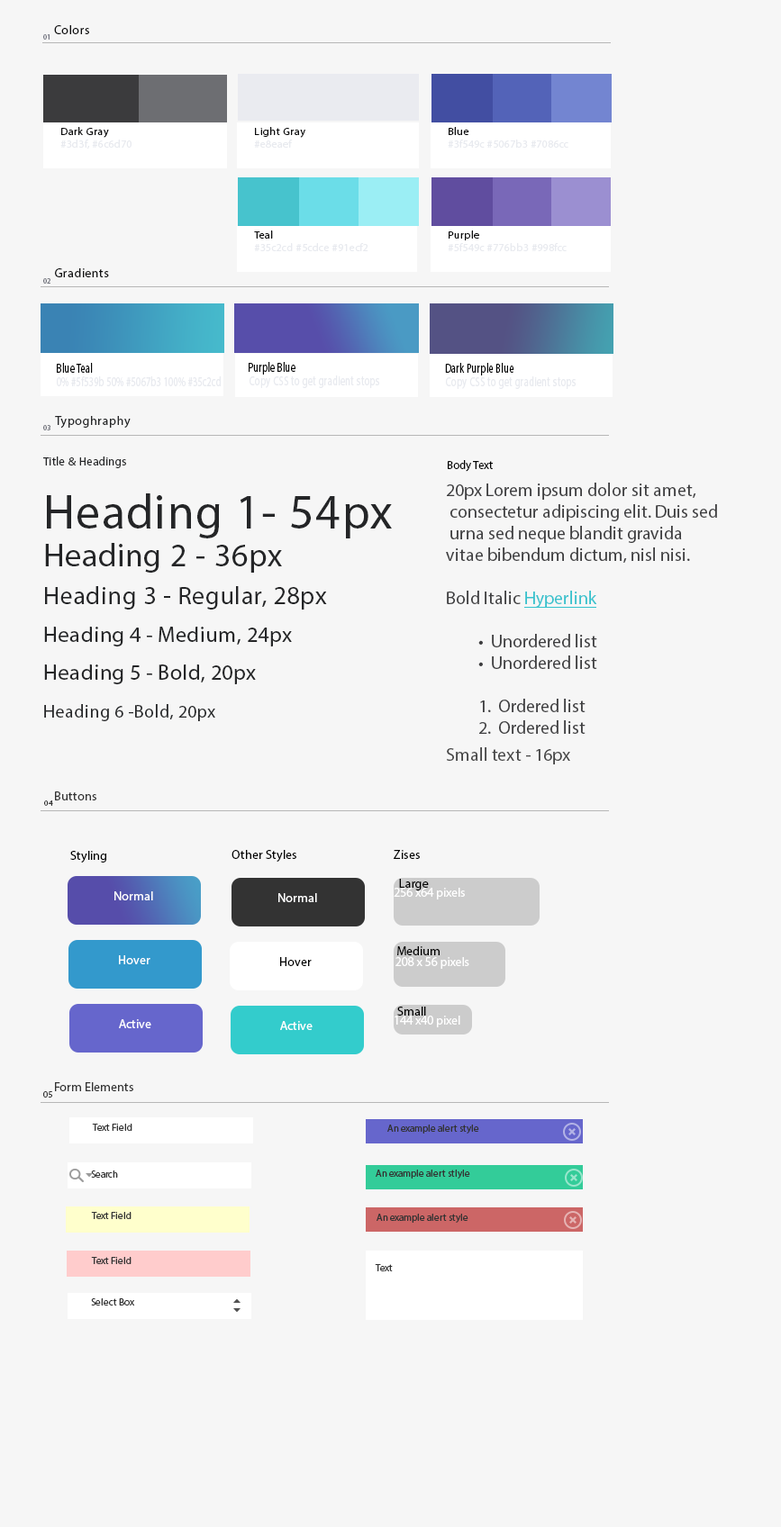
<style>
.page{position:relative;width:781px;height:1527px;background:#f6f6f6}
.page>*{position:absolute;margin:0}
.t1{font:12.6px "MyriadPro-Regular";letter-spacing:0.025em;color:#0c0c0d}
.t2{font:7.2px "MyriadPro-Regular";letter-spacing:0.025em;color:#767884}
.t3{font:10.7px/12.6px "MyriadPro-Regular";letter-spacing:0.025em;color:#e8eaef}
.t4{font:10.7px/12.6px "MyriadPro-Regular";letter-spacing:0.025em;color:#0c0c0d}
.t5{font:12.6px "MyriadPro-Regular";letter-spacing:0.025em;color:#121213}
.t6{font:7.2px "MyriadPro-Regular";letter-spacing:0.025em;color:#71737c}
.t7{font:13.4px/13.4px "MyriadPro-Regular";letter-spacing:0.025em;color:#e8eaef;scale:0.7 1}
.t8{font:13.4px/13.4px "MyriadPro-Regular";letter-spacing:0.025em;color:#060606;scale:0.7 1}
.t9{font:12.6px "MyriadPro-Regular";letter-spacing:0.025em;color:#242527}
.t10{font:21.6px/12.6px "MyriadPro-Regular";letter-spacing:0.025em;color:#242527}
.t11{font:11.7px/12.6px "MyriadPro-Regular";letter-spacing:0.025em;color:#242527}
.t12{font:48.6px/12.6px "MyriadPro-Regular";letter-spacing:0.025em;color:#242527}
.t13{font:32.4px/12.6px "MyriadPro-Regular";letter-spacing:0.025em;color:#242527}
.t14{font:25.2px/12.6px "MyriadPro-Regular";letter-spacing:0.025em;color:#242527}
.t15{font:18px/12.6px "MyriadPro-Regular";letter-spacing:0.025em;color:#242527}
.t16{font:11.7px "MyriadPro-Regular";color:#000000}
.t17{font:18px/21.6px "MyriadPro-Regular";color:#3d3d3f}
.t18{font:18px/21.6px "MyriadPro-Regular";color:#35c2cd;text-decoration:underline}
.t19{font:18px/27px "MyriadPro-Regular";color:#444444}
.t20{font:12.6px "MyriadPro-Regular";color:#333333}
.t21{font:8.1px "MyriadPro-Regular";color:#333333}
.t22{font:12.6px "MyriadPro-Regular";color:#000000}
.t23{font:12.6px "MyriadPro-Regular";color:#ffffff}
.t24{font:9px "MyriadPro-Regular";color:#333333}
.t25{font:9.9px "MyriadPro-Regular";color:#333333}
</style>
<div class="page">
<p class="t1" style="left:54px;top:25px;width:35px;height:9px">Colors</p>
<p class="t2" style="left:43px;top:34px;width:7px;height:6px">01</p>
<p class="t3" style="left:60px;top:127px;width:71px;height:22px"><span class="t4">Dark Gray<br></span>#3d3f, #6c6d70</p>
<p class="t4" style="left:254px;top:127px;width:51px;height:21px">Light Gray<br><span class="t3">#e8eaef</span></p>
<p class="t3" style="left:448px;top:127px;width:120px;height:21px"><span class="t4">Blue<br></span>#3f549c #5067b3 #7086cc</p>
<p class="t3" style="left:254px;top:231px;width:114px;height:20px"><span class="t4">Teal<br></span>#35c2cd #5cdce #91ecf2</p>
<p class="t3" style="left:448px;top:231px;width:118px;height:20px"><span class="t4">Purple<br></span>#5f549c #776bb3 #998fcc</p>
<p class="t5" style="left:55px;top:268px;width:54px;height:9px">Gradients</p>
<p class="t6" style="left:43px;top:278px;width:7px;height:6px">02</p>
<p class="t7" style="left:57px;top:363px;width:164px;height:23px;text-align:center"><span class="t8">                Blue Teal<br></span>0% #5f539b 50% #5067b3 100% #35c2cd</p>
<p class="t7" style="left:249px;top:362px;width:130px;height:26px;text-align:center"><span class="t8">                    Purple Blue<br></span>Copy CSS to get gradient stops</p>
<p class="t7" style="left:445px;top:363px;width:130px;height:26px;text-align:center"><span class="t8">                              Dark Purple Blue<br></span>Copy CSS to get gradient stops</p>
<p class="t6" style="left:43px;top:425px;width:7px;height:5px">03</p>
<p class="t9" style="left:55px;top:416px;width:76px;height:13px">Typoghraphy</p>
<p class="t10" style="left:43px;top:457px;width:349px;height:264px"><span class="t11">Title &amp; Headings<br><br><br><br><br></span><span class="t12">Heading 1- 54px<br><br><br></span><span class="t13">Heading 2 - 36px<br><br><br></span><span class="t14">Heading 3 - Regular, 28px<br><br><br></span>Heading 4 - Medium, 24px<br><br><br>Heading 5 - Bold, 20px<br><br><br><span class="t15">Heading 6 -Bold, 20px</span></p>
<p class="t16" style="left:448px;top:460px;width:45px;height:12px">Body Text</p>
<p class="t17" style="left:446px;top:483px;width:271px;height:282px">20px Lorem ipsum dolor sit amet,<br> consectetur adipiscing elit. Duis sed<br> urna sed neque blandit gravida <br>vitae bibendum dictum, nisl nisi.<br><br>Bold Italic <span class="t18">Hyperlink <br><br></span> •  Unordered list<br> •  Unordered list<br><br> 1.  Ordered list<br> 2.  Ordered list<br><span class="t19">Small text - 16px</span></p>
<p class="t20" style="left:55px;top:792px;width:41px;height:9px">Buttons</p>
<p class="t21" style="left:44px;top:801px;width:9px;height:5px">04</p>
<p class="t22" style="left:70px;top:851px;width:36px;height:12px">Styling</p>
<p class="t22" style="left:231px;top:850px;width:65px;height:12px">Other Styles</p>
<p class="t22" style="left:394px;top:850px;width:26px;height:9px">Zises</p>
<p class="t23" style="left:114px;top:892px;width:39px;height:9px">Normal</p>
<p class="t23" style="left:278px;top:893px;width:39px;height:9px">Normal</p>
<p class="t22" style="left:397px;top:946px;width:42px;height:9px">Medium</p>
<p class="t23" style="left:119px;top:955px;width:31px;height:9px">Hover</p>
<p class="t22" style="left:280px;top:957px;width:32px;height:9px">Hover</p>
<p class="t23" style="left:395px;top:957px;width:74px;height:12px">208 x 56 pixels</p>
<p class="t23" style="left:119px;top:1019px;width:32px;height:9px">Active</p>
<p class="t23" style="left:280px;top:1021px;width:32px;height:9px">Active</p>
<p class="t20" style="left:55px;top:1082px;width:78px;height:9px">Form Elements</p>
<p class="t24" style="left:43px;top:1091px;width:9px;height:7px">05</p>
<p class="t25" style="left:92px;top:1124px;width:40px;height:7px">Text Field</p>
<p class="t25" style="left:387px;top:1125px;width:92px;height:9px">An example alert style</p>
<p class="t25" style="left:376px;top:1170px;width:94px;height:9px">An example alert stlyle</p>
<p class="t25" style="left:91px;top:1171px;width:27px;height:7px">Search</p>
<p class="t25" style="left:91px;top:1212px;width:40px;height:7px">Text Field</p>
<p class="t25" style="left:376px;top:1214px;width:92px;height:9px">An example alert style</p>
<p class="t25" style="left:91px;top:1257px;width:40px;height:7px">Text Field</p>
<p class="t25" style="left:375px;top:1264px;width:18px;height:8px">Text</p>
<p class="t25" style="left:91px;top:1299px;width:43px;height:7px">Select Box</p>
</div>
